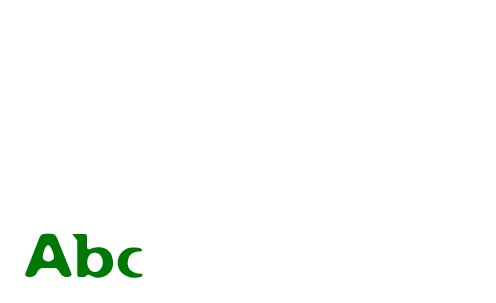
<style>
.page{position:relative;width:496px;height:303px;background:#ffffff}
.page>*{position:absolute;margin:0}
.t1{font:60px "Flexure";color:#007806}
</style>
<div class="page">
<p class="t1" style="left:25px;top:233px;width:118px;height:45px">Abc</p>
</div>
